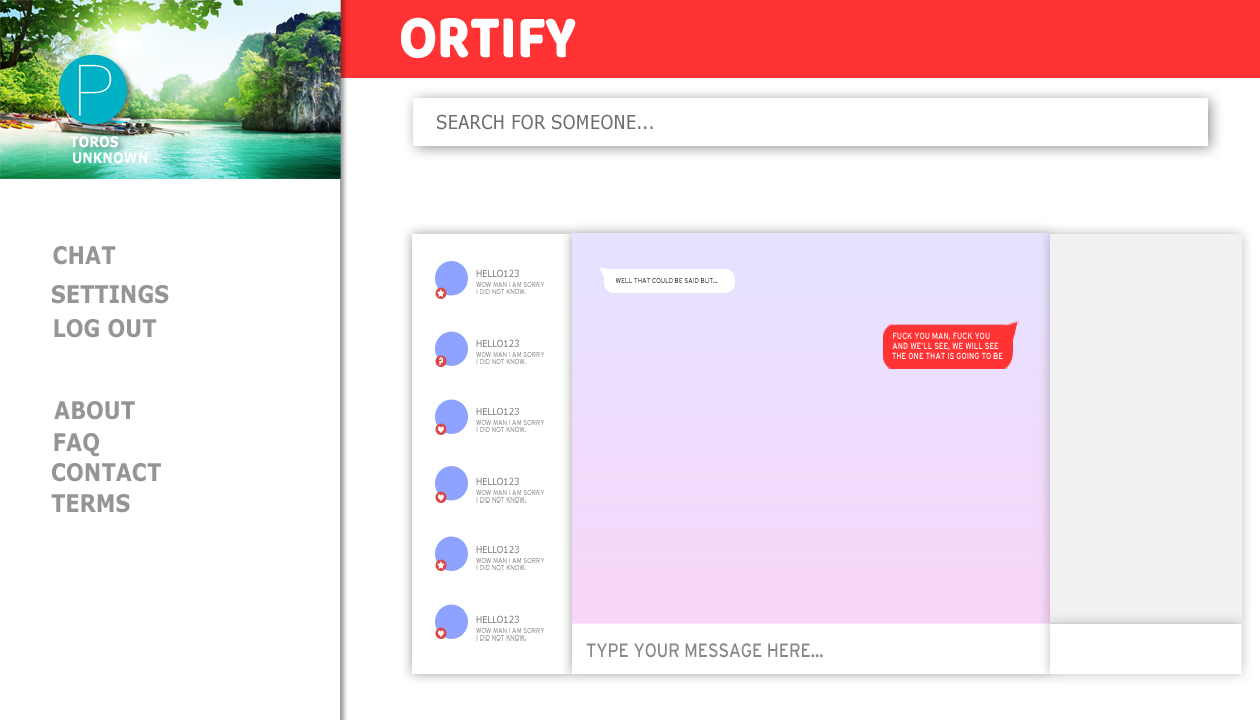
<style>
.page{position:relative;width:1260px;height:720px;background:#ffffff}
.page>*{position:absolute;margin:0}
.t1{font:62.8px "BalooBhai";color:#ffffff;text-transform:uppercase;scale:0.86 1}
.t2{font:19.3px "Verdana";color:#6d6d6d;text-transform:uppercase;scale:0.86 1}
.t3{font:14.5px/1287.5px "Verdana";color:#ffffff;text-transform:uppercase;scale:0.86 1}
.t4{font:14.5px/1287.5px "Verdana-Bold";color:#ffffff;text-transform:uppercase;scale:0.86 1}
.t5{font:14.5px "Verdana-Bold";color:#ffffff;text-transform:uppercase;scale:0.86 1}
.t6{font:24.2px "Verdana-Bold";color:#959595;text-transform:uppercase;scale:0.86 1}
.t7{font:9.7px "Impact";color:#ffffff;text-transform:uppercase;scale:0.86 1}
.t8{font:19.3px "Interstate-Regular";color:#888888;text-transform:uppercase;scale:0.86 1}
</style>
<div class="page">
<p class="t1" style="left:401px;top:17px;width:175px;height:42px">ORTIFY</p>
<p class="t2" style="left:437px;top:114px;width:216px;height:16px">SEARCH FOR SOMEONE...</p>
<p class="t3" style="left:70px;top:136px;width:48px;height:12px"><span class="t4">TOROS<br></span>UNKNOWN EMAIL</p>
<p class="t5" style="left:73px;top:152px;width:74px;height:12px">UNKNOWN</p>
<p class="t6" style="left:53px;top:246px;width:63px;height:19px">CHAT</p>
<p class="t6" style="left:52px;top:285px;width:117px;height:19px">SETTINGS</p>
<p class="t6" style="left:54px;top:319px;width:103px;height:19px">LOG OUT</p>
<p class="t7" style="left:439px;top:357px;width:4px;height:8px">?</p>
<p class="t6" style="left:54px;top:401px;width:81px;height:19px">ABOUT</p>
<p class="t6" style="left:54px;top:433px;width:45px;height:24px">FAQ</p>
<p class="t6" style="left:52px;top:463px;width:109px;height:19px">CONTACT</p>
<p class="t6" style="left:51px;top:494px;width:79px;height:19px">TERMS</p>
<p class="t8" style="left:586px;top:643px;width:237px;height:15px">type your message here...</p>
</div>
